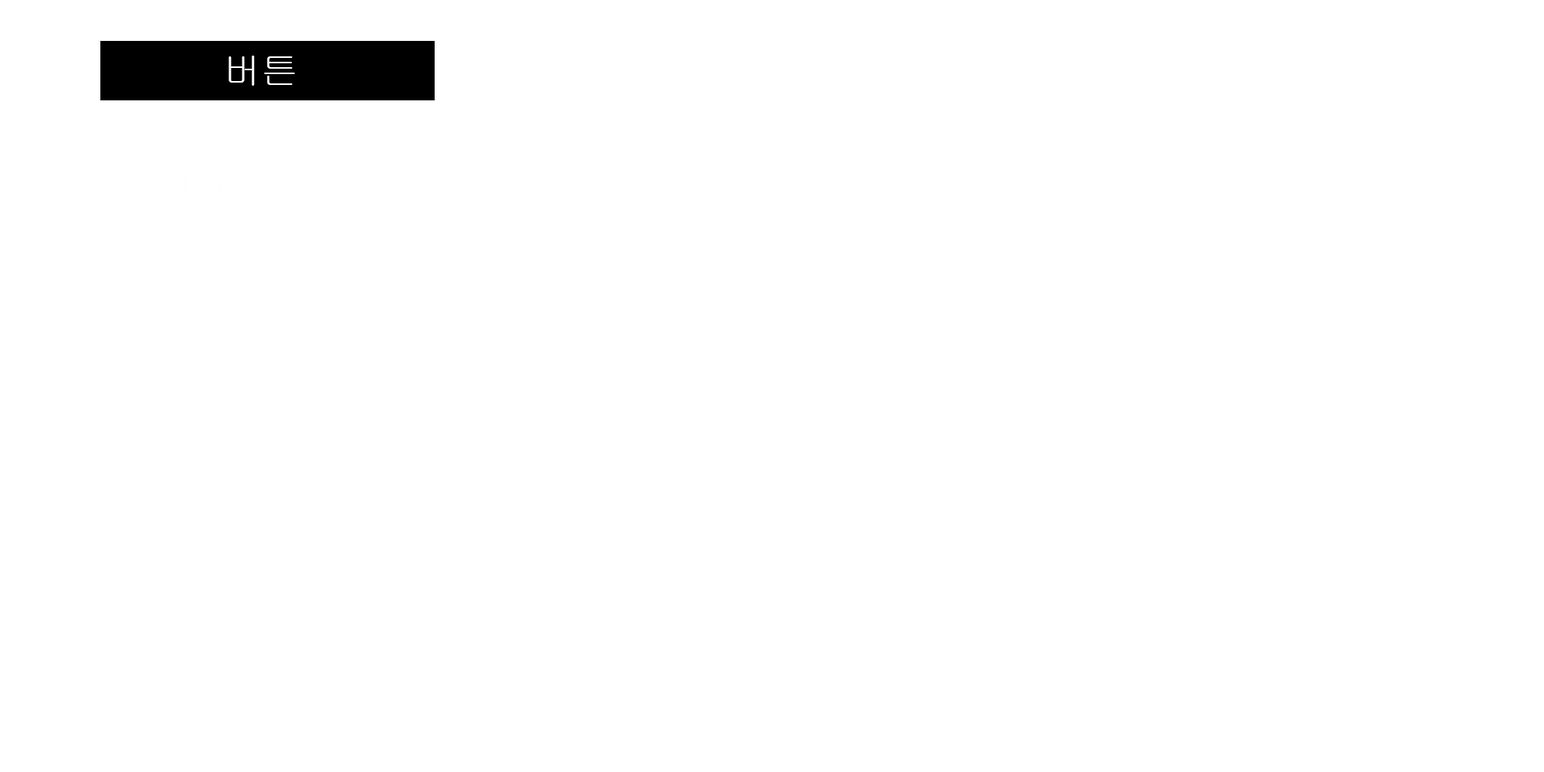
<style>
.page{position:relative;width:1544px;height:772px;background:#ffffff}
.page>*{position:absolute;margin:0}
.t1{font:37.1px "Gulim";color:#fefefe}
</style>
<div class="page">
<p class="t1" style="left:229px;top:56px;width:66px;height:30px">버튼</p>
</div>
